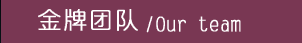
<style>
.page{position:relative;width:302px;height:43px;background:#793753}
.page>*{position:absolute;margin:0}
.t1{font:24px "ÎÄ¶¦Ï¸Ô²¼ò-Regular";letter-spacing:0.075em;color:#ffffff;font-weight:bold}
.t2{font:18.6px "ÎÄ¶¦Ï¸Ô²¼ò-Regular";letter-spacing:0.075em;color:#ffffff;font-weight:bold}
</style>
<div class="page">
<p class="t1" style="left:38px;top:9px;width:100px;height:22px">金牌团队</p>
<p class="t2" style="left:146px;top:16px;width:95px;height:17px">/Our team</p>
</div>
